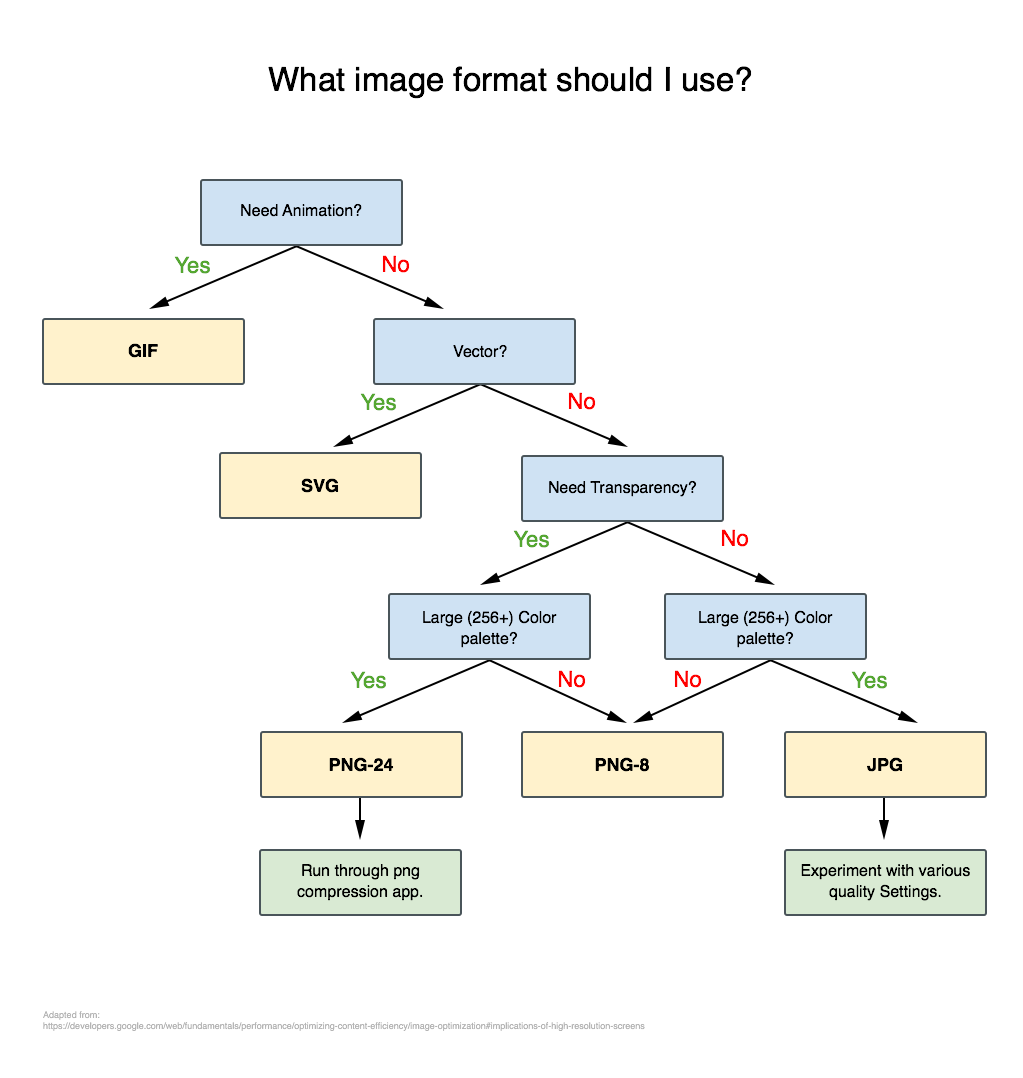
<style>
.page{position:relative;width:1023px;height:1078px;background:#ffffff}
.page>*{position:absolute;margin:0}
.t1{font:33px "Helvetica";color:#000000}
.t2{font:16px "Helvetica";color:#000000}
.t3{font:22px "Helvetica";color:#55a731}
.t4{font:22px "Helvetica";color:#ff0000}
.t5{font:18px "Helvetica-Bold";color:#000000}
.t6{font:16px/21px "Helvetica";color:#000000}
.t7{font:9px "Helvetica";color:#b5b5b5}
</style>
<div class="page">
<p class="t1" style="left:268px;top:66px;width:484px;height:33px">What image format should I use?</p>
<p class="t2" style="left:241px;top:203px;width:121px;height:14px">Need Animation?</p>
<p class="t3" style="left:174px;top:256px;width:36px;height:18px">Yes</p>
<p class="t4" style="left:382px;top:255px;width:28px;height:18px">No</p>
<p class="t5" style="left:128px;top:343px;width:30px;height:15px">GIF</p>
<p class="t2" style="left:453px;top:344px;width:54px;height:14px">Vector?</p>
<p class="t3" style="left:360px;top:393px;width:36px;height:18px">Yes</p>
<p class="t4" style="left:568px;top:392px;width:28px;height:18px">No</p>
<p class="t5" style="left:301px;top:478px;width:38px;height:15px">SVG</p>
<p class="t2" style="left:549px;top:480px;width:148px;height:17px">Need Transparency?</p>
<p class="t3" style="left:513px;top:530px;width:36px;height:18px">Yes</p>
<p class="t4" style="left:721px;top:529px;width:28px;height:18px">No</p>
<p class="t6" style="left:423px;top:610px;width:134px;height:38px;text-align:center">Large (256+) Color<br>palette?</p>
<p class="t6" style="left:699px;top:610px;width:134px;height:38px;text-align:center">Large (256+) Color<br>palette?</p>
<p class="t3" style="left:350px;top:671px;width:36px;height:18px">Yes</p>
<p class="t4" style="left:558px;top:670px;width:28px;height:18px">No</p>
<p class="t4" style="left:674px;top:670px;width:28px;height:18px">No</p>
<p class="t3" style="left:851px;top:671px;width:36px;height:18px">Yes</p>
<p class="t5" style="left:329px;top:757px;width:65px;height:15px">PNG-24</p>
<p class="t5" style="left:595px;top:757px;width:55px;height:15px">PNG-8</p>
<p class="t5" style="left:867px;top:757px;width:36px;height:15px">JPG</p>
<p class="t6" style="left:297px;top:864px;width:126px;height:37px;text-align:center">Run through png compression app.</p>
<p class="t6" style="left:801px;top:864px;width:169px;height:37px;text-align:center">Experiment with various quality Settings.</p>
<p class="t7" style="left:43px;top:1011px;width:602px;height:20px">Adapted from:<br>https://developers.google.com/web/fundamentals/performance/optimizing-content-efficiency/image-optimization#implications-of-high-resolution-screens</p>
</div>
